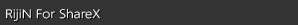
<style>
.page{position:relative;width:298px;height:25px;background:#333333}
.page>*{position:absolute;margin:0}
.t1{font:12.2px "SegoeUI-Light";color:#ffffff;scale:1.17 1}
</style>
<div class="page">
<p class="t1" style="left:6px;top:8px;width:94px;height:13px">RijiN For ShareX</p>
</div>
